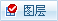
<style>
.page{position:relative;width:58px;height:21px}
.page>*{position:absolute;margin:0}
.t1{font:12px "SimSun";color:#265d87}
</style>
<div class="page">
<p class="t1" style="left:24px;top:5px;width:22px;height:11px">图层</p>
</div>
